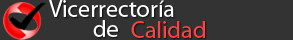
<style>
.page{position:relative;width:293px;height:40px;background:#333333}
.page>*{position:absolute;margin:0}
.t1{font:24px "MyriadPro-Regular";color:#ffffff}
.t2{font:24px "MyriadPro-Regular";color:#fc4242}
</style>
<div class="page">
<p class="t1" style="left:49px;top:0px;width:125px;height:17px">Vicerrectoría</p>
<p class="t1" style="left:93px;top:20px;width:25px;height:17px">de</p>
<p class="t2" style="left:131px;top:21px;width:74px;height:17px">Calidad</p>
</div>
